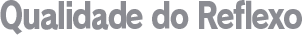
<style>
.page{position:relative;width:302px;height:38px;background:#ffffff}
.page>*{position:absolute;margin:0}
.t1{font:36px "RodinPro-EB";letter-spacing:-0.059em;color:#8b8c92;scale:0.83 1}
</style>
<div class="page">
<p class="t1" style="left:0px;top:0px;width:302px;height:35px">Qualidade do Reflexo</p>
</div>
